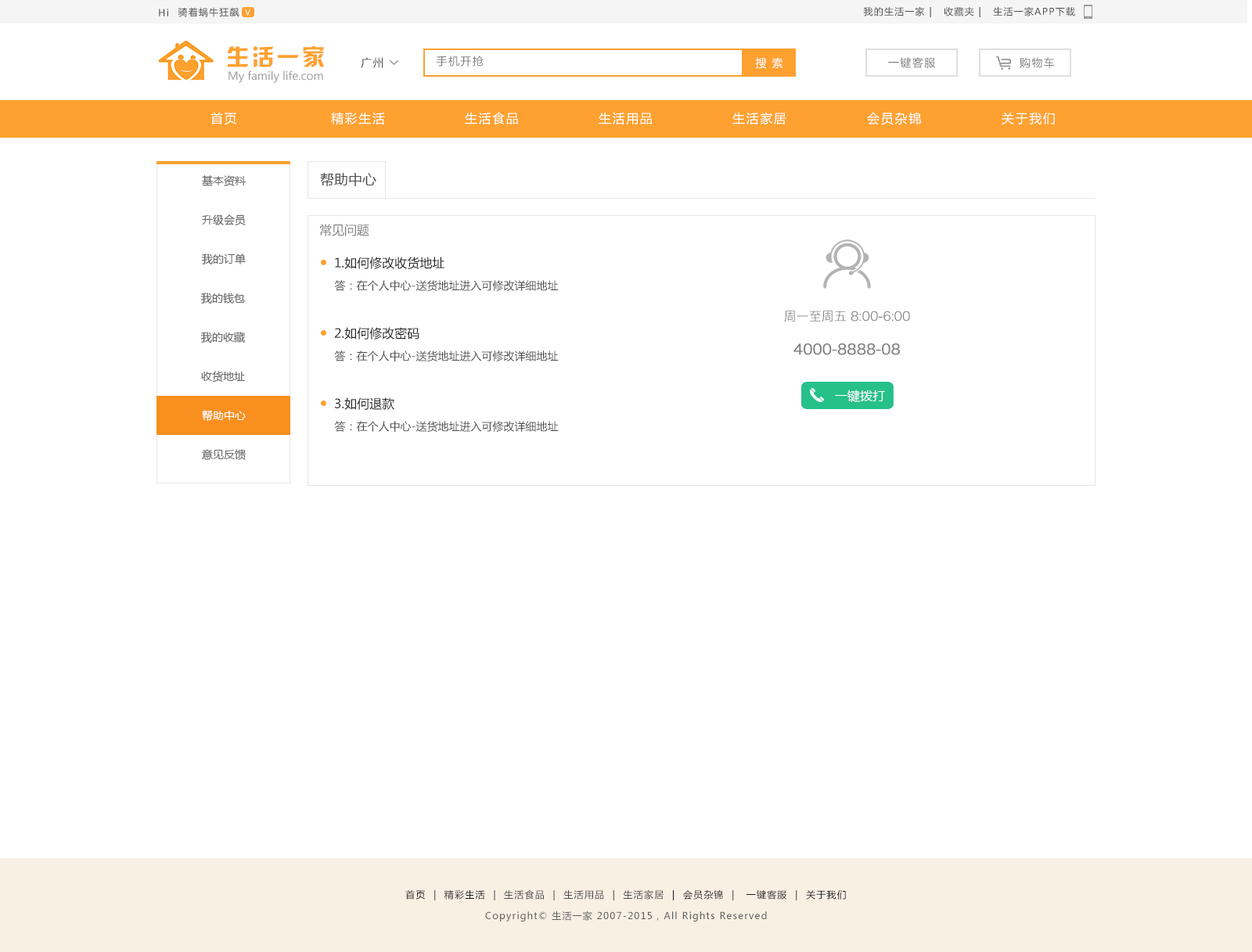
<style>
.page{position:relative;width:1252px;height:952px;background:#ffffff}
.page>*{position:absolute;margin:0}
.t1{font:9.4px "MicrosoftYaHei";letter-spacing:0.1em;color:#4d4d4d}
.t2{font:7.8px "MicrosoftYaHei";letter-spacing:0.1em;color:#ffffff}
.t3{font:22.7px "HYk2gj";letter-spacing:0.1em;color:#ffa130}
.t4{font:11px "MicrosoftYaHei";letter-spacing:0.1em;color:#4d4d4d}
.t5{font:11px "MicrosoftYaHei";letter-spacing:0.1em;color:#808080}
.t6{font:11px "MicrosoftYaHei";letter-spacing:0.1em;color:#ffffff}
.t7{font:11px "MicrosoftYaHei";color:#999999}
.t8{font:12.5px "MicrosoftYaHei";letter-spacing:0.1em;color:#ffffff}
.t9{font:12.9px "MicrosoftYaHei";letter-spacing:0.1em;color:#ffffff}
.t10{font:14.1px "MicrosoftYaHei";color:#4d4d4d}
.t11{font:11px "MicrosoftYaHei";color:#666666}
.t12{font:11px "MicrosoftYaHei";color:#656565}
.t13{font:12.5px "MicrosoftYaHei";color:#808080}
.t14{font:12.5px/70.4px "MicrosoftYaHei";color:#1a1a1a}
.t15{font:11px/70.4px "MicrosoftYaHei";color:#4d4d4d}
.t16{font:12.6px "HiraginoSansGB-W3";color:#808080}
.t17{font:14.2px "HiraginoSansGB-W3";color:#808080;font-weight:bold}
.t18{font:12.5px "MicrosoftYaHei";color:#ffffff}
.t19{font:11px "MicrosoftYaHei";color:#ffffff}
.t20{font:9.4px "MicrosoftYaHei";letter-spacing:0.1em;color:#1a1a1a}
.t21{font:9.4px "MicrosoftYaHei";letter-spacing:0.1em;color:#5e5e5e}
</style>
<div class="page">
<p class="t1" style="left:159px;top:9px;width:9px;height:7px">Hi</p>
<p class="t1" style="left:178px;top:7px;width:61px;height:10px">骑着蜗牛狂飙</p>
<p class="t2" style="left:245px;top:9px;width:5px;height:7px">V</p>
<p class="t1" style="left:863px;top:7px;width:212px;height:10px">我的生活一家 |   收藏夹 |   生活一家APP下载</p>
<p class="t3" style="left:227px;top:46px;width:97px;height:22px">生活一家</p>
<p class="t4" style="left:361px;top:57px;width:22px;height:11px">广州</p>
<p class="t5" style="left:436px;top:56px;width:48px;height:11px">手机开抢</p>
<p class="t6" style="left:755px;top:57px;width:28px;height:12px">搜 索</p>
<p class="t5" style="left:888px;top:57px;width:48px;height:11px">一键客服</p>
<p class="t5" style="left:1020px;top:57px;width:35px;height:11px">购物车</p>
<p class="t7" style="left:229px;top:70px;width:94px;height:13px">My family life.com</p>
<p class="t8" style="left:211px;top:112px;width:25px;height:13px">首页</p>
<p class="t8" style="left:331px;top:112px;width:54px;height:13px">精彩生活</p>
<p class="t8" style="left:465px;top:112px;width:53px;height:13px">生活食品</p>
<p class="t8" style="left:599px;top:112px;width:53px;height:13px">生活用品</p>
<p class="t8" style="left:732px;top:112px;width:54px;height:13px">生活家居</p>
<p class="t9" style="left:867px;top:112px;width:54px;height:13px">会员杂锦</p>
<p class="t8" style="left:1002px;top:112px;width:53px;height:13px">关于我们</p>
<p class="t10" style="left:320px;top:173px;width:56px;height:13px">帮助中心</p>
<p class="t11" style="left:202px;top:175px;width:44px;height:11px">基本资料</p>
<p class="t12" style="left:202px;top:214px;width:44px;height:12px">升级会员</p>
<p class="t13" style="left:320px;top:224px;width:49px;height:12px">常见问题</p>
<p class="t12" style="left:201px;top:254px;width:45px;height:11px">我的订单</p>
<p class="t14" style="left:334px;top:257px;width:110px;height:153px">1.如何修改收货地址<br>2.如何修改密码<br>3.如何退款</p>
<p class="t15" style="left:334px;top:280px;width:225px;height:152px">答：在个人中心-送货地址进入可修改详细地址<br>答：在个人中心-送货地址进入可修改详细地址<br>答：在个人中心-送货地址进入可修改详细地址</p>
<p class="t12" style="left:200px;top:293px;width:45px;height:11px">我的钱包</p>
<p class="t16" style="left:784px;top:311px;width:126px;height:11px">周一至周五 8:00-6:00</p>
<p class="t12" style="left:200px;top:332px;width:45px;height:12px">我的收藏</p>
<p class="t17" style="left:794px;top:344px;width:106px;height:11px">4000-8888-08</p>
<p class="t12" style="left:201px;top:371px;width:44px;height:12px">收货地址</p>
<p class="t18" style="left:835px;top:390px;width:50px;height:12px">一键拨打</p>
<p class="t19" style="left:202px;top:410px;width:44px;height:12px">帮助中心</p>
<p class="t12" style="left:202px;top:449px;width:44px;height:11px">意见反馈</p>
<p class="t20" style="left:405px;top:890px;width:441px;height:11px">首页  |  精彩生活  |  <span class="t1">生活食品</span>  |  <span class="t1">生活用品</span>  |  <span class="t1">生活家居</span>  |  会员杂锦  |   一键客服  |  关于我们</p>
<p class="t21" style="left:485px;top:911px;width:282px;height:11px">Copyright© 生活一家 2007-2015，All Rights Reserved</p>
</div>
